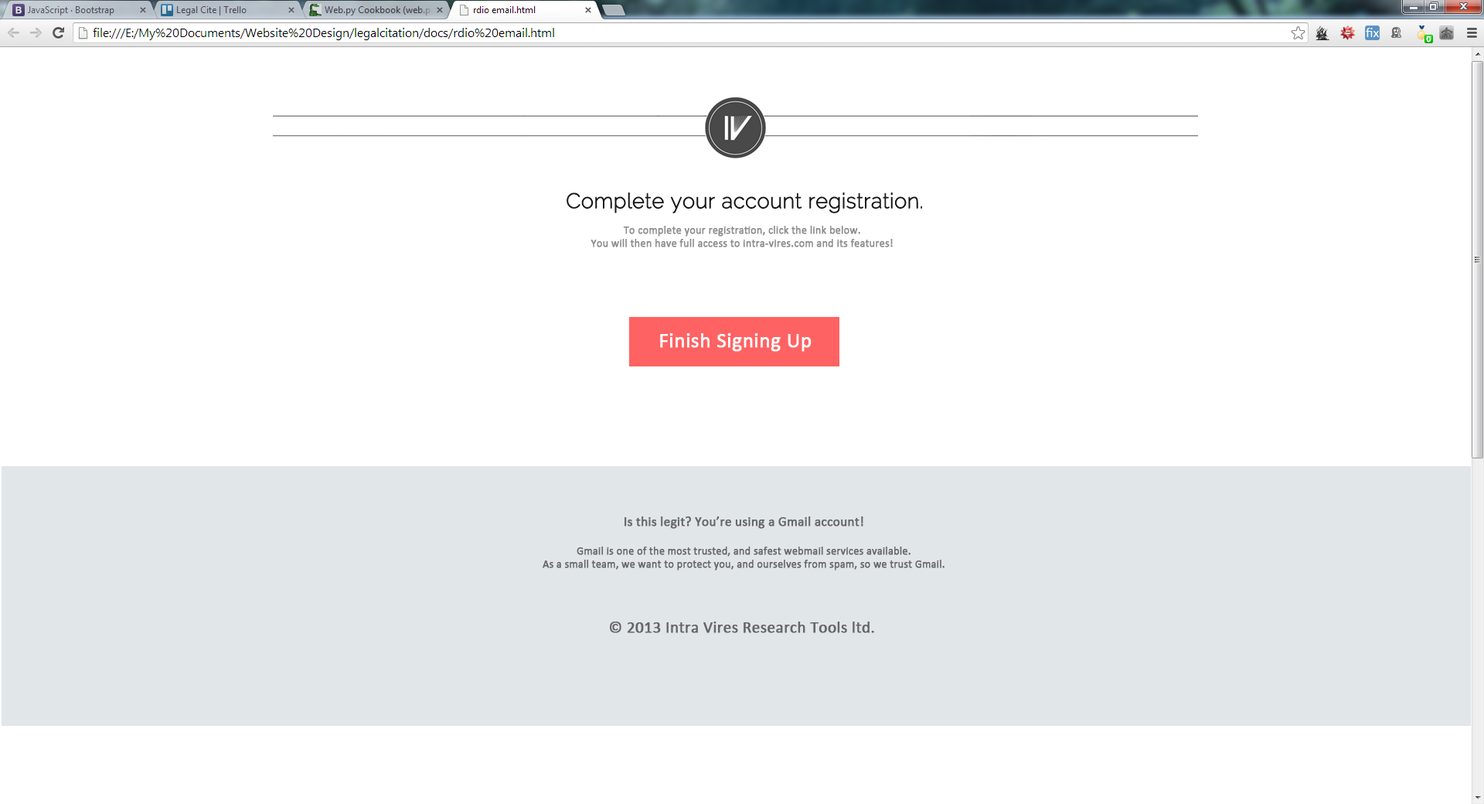
<style>
.page{position:relative;width:1484px;height:804px;background:#ffffff}
.page>*{position:absolute;margin:0}
.t1{font:20.9px "Raleway-ExtraLight";color:#161616;font-weight:bold}
.t2{font:10.8px "Calibri";color:#8a8b8c;font-weight:bold}
.t3{font:20.9px "Calibri";color:#ffffff;font-weight:bold}
.t4{font:10.8px "Calibri";color:#666666;font-weight:bold}
.t5{font:13.1px "Calibri";color:#666666;font-weight:bold}
.t6{font:16.2px "Calibri";color:#666666;font-weight:bold}
</style>
<div class="page">
<p class="t1" style="left:566px;top:192px;width:356px;height:21px">Complete your account registration.</p>
<p class="t2" style="left:590px;top:226px;width:303px;height:21px;text-align:center">To complete your registration, click the link below. <br>You will then have full access to intra-vires.com and its features!</p>
<p class="t3" style="left:660px;top:333px;width:151px;height:19px">Finish Signing Up</p>
<p class="t4" style="left:542px;top:516px;width:402px;height:54px;text-align:center"><span class="t5">Is this legit? You’re using a Gmail account!<br><br></span>Gmail is one of the most trusted, and safest webmail services available. <br>As a small team, we want to protect you, and ourselves from spam, so we trust Gmail.</p>
<p class="t6" style="left:610px;top:621px;width:264px;height:12px">© 2013 Intra Vires Research Tools ltd.</p>
</div>
